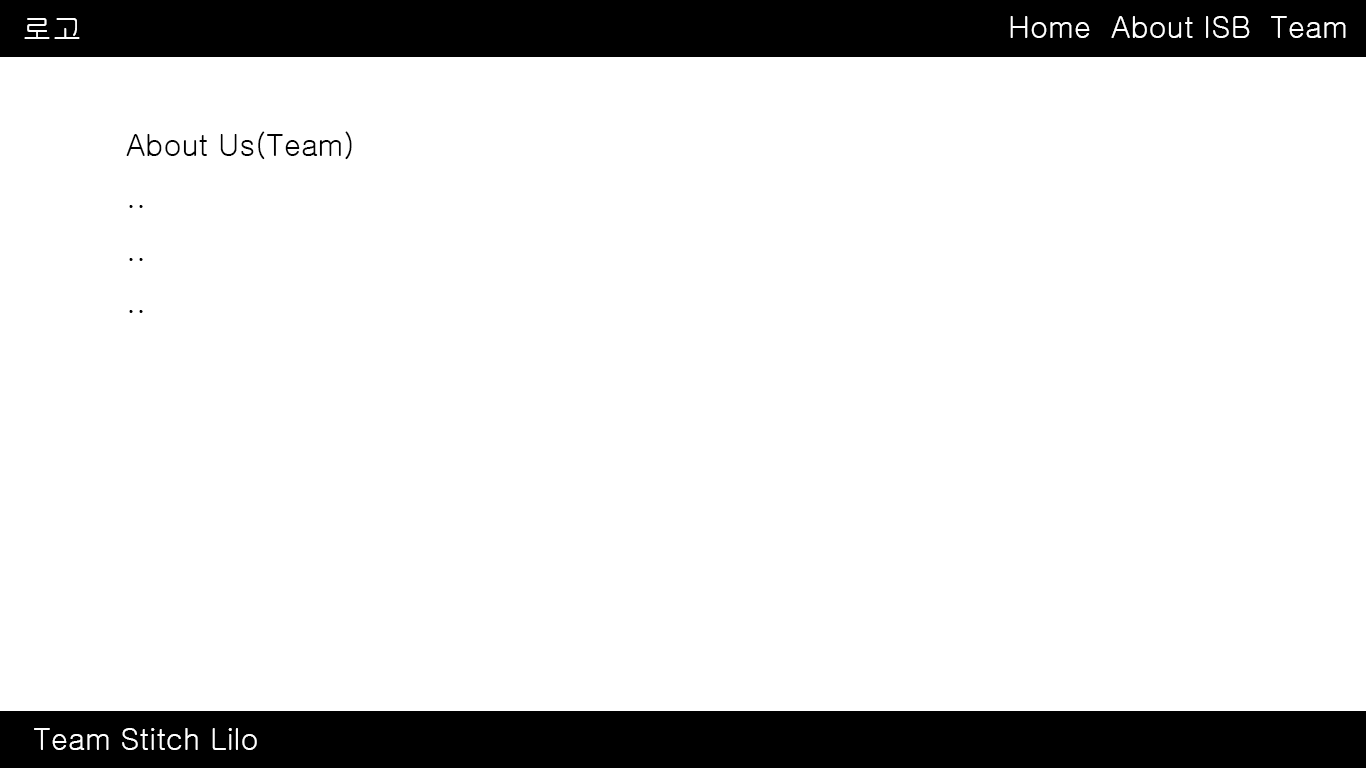
<style>
.page{position:relative;width:1366px;height:768px;background:#ffffff}
.page>*{position:absolute;margin:0}
.t1{font:30px "Gulim";color:#ffffff}
.t2{font:30px "Gulim";color:#000000}
</style>
<div class="page">
<p class="t1" style="left:1010px;top:16px;width:336px;height:22px">Home  About ISB  Team</p>
<p class="t1" style="left:24px;top:18px;width:56px;height:21px">로고</p>
<p class="t2" style="left:126px;top:131px;width:226px;height:182px">About Us(Team)<br>..<br>..<br>..</p>
<p class="t1" style="left:34px;top:728px;width:223px;height:22px">Team Stitch Lilo</p>
</div>
